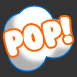
<style>
.page{position:relative;width:77px;height:77px;background:#333333}
.page>*{position:absolute;margin:0}
.t1{font:32.4px "BubbleGum";color:#ffffff}
</style>
<div class="page">
<p class="t1" style="left:4px;top:17px;width:69px;height:39px;rotate:-13deg">POP!</p>
<p class="t1" style="left:4px;top:17px;width:69px;height:39px;rotate:-13deg">POP!</p>
</div>
